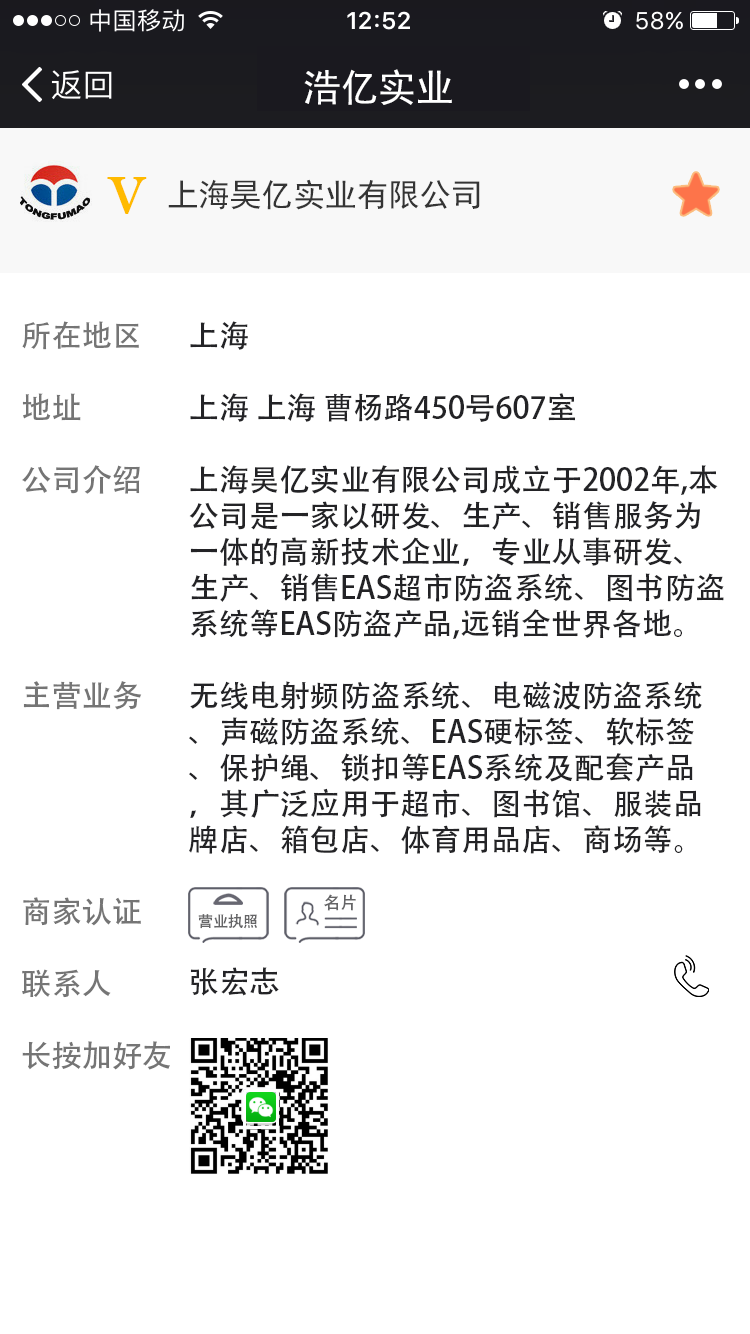
<style>
.page{position:relative;width:750px;height:1334px;background:#ffffff}
.page>*{position:absolute;margin:0}
.t1{font:38.4px "SimHei";color:#ffffff}
.t2{font:53.8px "BaskOldFace";color:#ffba00;font-weight:bold}
.t3{font:32px "SimHei";color:#343434}
.t4{font:30.3px/72px "AdobeHeitiStd-Regular";color:#757575}
.t5{font:30.3px "AdobeHeitiStd-Regular";color:#232326}
.t6{font:30.3px/36px "AdobeHeitiStd-Regular";color:#232326}
.t7{font:17.2px "AdobeHeitiStd-Regular";color:#656567}
.t8{font:15.5px "AdobeHeitiStd-Regular";color:#656567;scale:0.97 1}
</style>
<div class="page">
<p class="t1" style="left:304px;top:69px;width:148px;height:36px">浩亿实业</p>
<p class="t2" style="left:107px;top:177px;width:40px;height:37px">V</p>
<p class="t3" style="left:168px;top:179px;width:312px;height:31px">上海昊亿实业有限公司</p>
<p class="t4" style="left:22px;top:321px;width:148px;height:749px">所在地区<br>地址<br>公司介绍<br><br><br>主营业务<br><br><br>商家认证<br>联系人<br>长按加好友</p>
<p class="t5" style="left:190px;top:321px;width:58px;height:29px">上海</p>
<p class="t5" style="left:190px;top:393px;width:385px;height:29px">上海 上海 曹杨路450号607室</p>
<p class="t6" style="left:189px;top:465px;width:535px;height:174px">上海昊亿实业有限公司成立于2002年,本公司是一家以研发、生产、销售服务为一体的高新技术企业，专业从事研发、生产、销售EAS超市防盗系统、图书防盗系统等EAS防盗产品,远销全世界各地。</p>
<p class="t6" style="left:189px;top:681px;width:513px;height:173px">无线电射频防盗系统、电磁波防盗系统、声磁防盗系统、EAS硬标签、软标签、保护绳、锁扣等EAS系统及配套产品，其广泛应用于超市、图书馆、服装品牌店、箱包店、体育用品店、商场等。</p>
<p class="t7" style="left:324px;top:894px;width:32px;height:17px">名片</p>
<p class="t8" style="left:198px;top:914px;width:59px;height:15px">营业执照</p>
<p class="t5" style="left:190px;top:967px;width:89px;height:29px">张宏志</p>
</div>
